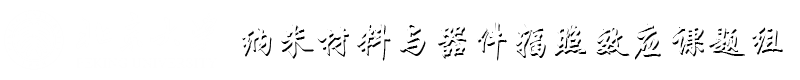
<style>
.page{position:relative;width:800px;height:80px;background:#ffffff}
.page>*{position:absolute;margin:0}
.t1{font:39.2px "STXingkai"}
</style>
<div class="page">
<p class="t1" style="left:242px;top:22px;width:541px;height:39px">纳米材料与器件辐照效应课题组</p>
</div>
